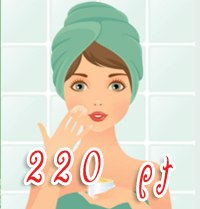
<style>
.page{position:relative;width:200px;height:209px}
.page>*{position:absolute;margin:0}
.t1{font:60px "AYummyApology";letter-spacing:0.2em;color:#e52222;font-weight:bold;scale:0.68 1}
</style>
<div class="page">
<p class="t1" style="left:26px;top:150px;width:147px;height:49px">220 pt</p>
</div>
